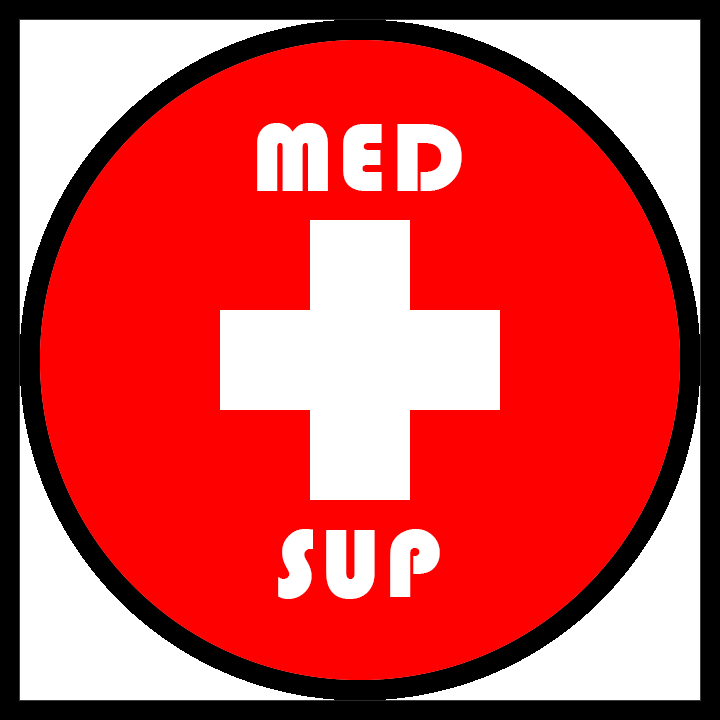
<style>
.page{position:relative;width:720px;height:720px;background:#ff0000}
.page>*{position:absolute;margin:0}
.t1{font:100px "Bauhaus93";letter-spacing:0.05em;color:#ffffff}
</style>
<div class="page">
<p class="t1" style="left:257px;top:123px;width:205px;height:68px">MED</p>
<p class="t1" style="left:278px;top:529px;width:162px;height:70px">SUP</p>
</div>
